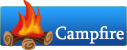
<style>
.page{position:relative;width:127px;height:50px;background:#ffffff}
.page>*{position:absolute;margin:0}
.t1{font:18px "Sylfaen";color:#ffffff}
</style>
<div class="page">
<p class="t1" style="left:55px;top:26px;width:69px;height:18px">Campfire</p>
</div>
